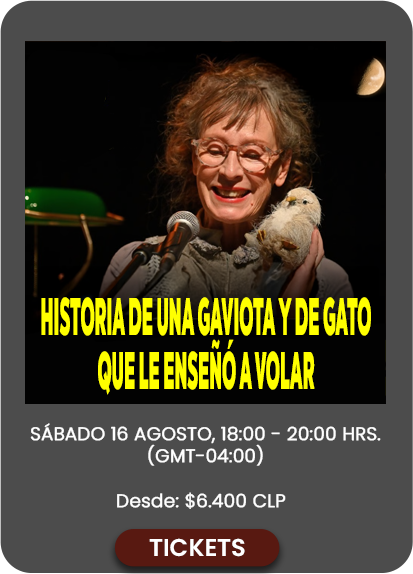
<style>
.page{position:relative;width:413px;height:574px;background:#4c4c4c}
.page>*{position:absolute;margin:0}
.t1{font:53.1px/53.3px "ChronicaPro-Black";color:#ffff00;scale:0.33 1}
.t2{font:53.1px/53.3px "Alice-Regular";color:#ffff00;scale:0.33 1}
.t3{font:18.1px "Poppins-Light";color:#ffffff;text-transform:uppercase;font-weight:bold}
.t4{font:18.1px "Poppins-Light";color:#ffffff;font-weight:bold}
.t5{font:24.3px "Poppins-SemiBold";color:#ffffff;text-transform:uppercase}
</style>
<div class="page">
<p class="t1" style="left:41px;top:297px;width:330px;height:98px;text-align:center"><span class="t2"><br></span><br>HISTORIA DE UNA GAVIOTA Y DE GATO QUE LE ENSEÑÓ A VOLAR</p>
<p class="t3" style="left:30px;top:423px;width:351px;height:43px;text-align:center">Sábado 16 Agosto, 18:00 - 20:00 hrs. (GMT-04:00)</p>
<p class="t4" style="left:117px;top:492px;width:169px;height:17px">Desde: $6.400 CLP</p>
<p class="t5" style="left:149px;top:538px;width:96px;height:19px">TICKETS</p>
</div>
